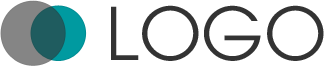
<style>
.page{position:relative;width:324px;height:66px;background:#ffffff}
.page>*{position:absolute;margin:0}
.t1{font:72px "AvantGardeCE-Book";color:#333333;text-transform:uppercase}
</style>
<div class="page">
<p class="t1" style="left:111px;top:5px;width:213px;height:56px">Logo</p>
</div>
